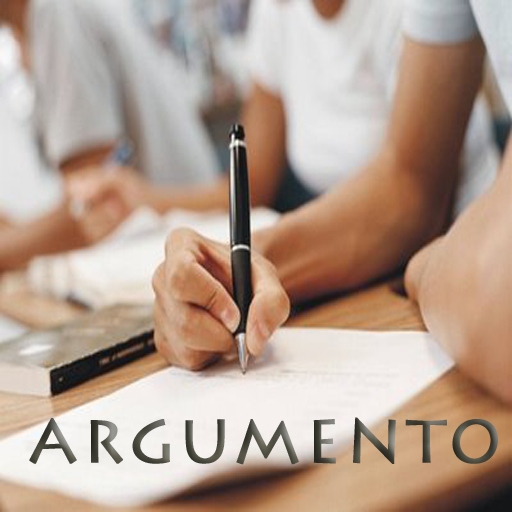
<style>
.page{position:relative;width:512px;height:512px}
.page>*{position:absolute;margin:0}
.t1{font:60px "LithosPro-Regular";letter-spacing:0.07em;text-transform:uppercase;font-weight:bold}
</style>
<div class="page">
<p class="t1" style="left:29px;top:417px;width:469px;height:48px">Argumento</p>
</div>
